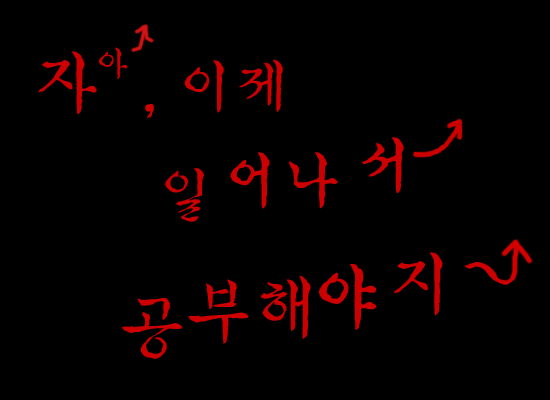
<style>
.page{position:relative;width:550px;height:400px;background:#000000}
.page>*{position:absolute;margin:0}
.t1{font:72px "YDIYhkM-KSCpc-EUC-H";color:#cc0000}
.t2{font:36px "YDIYhkM-KSCpc-EUC-H";color:#cc0000}
.t3{font:60px "YDIYhkM-KSCpc-EUC-H";color:#cc0000}
.t4{font:60px "YDIYhkB-KSCpc-EUC-H";color:#cc0000}
.t5{font:72px "YDIYhkB-KSCpc-EUC-H";color:#cc0000}
.t6{font:72px "YDIYhkB-KSCpc-EUC-H";color:#cc0000;scale:1.23 1}
</style>
<div class="page">
<p class="t1" style="left:38px;top:51px;width:59px;height:64px">자</p>
<p class="t2" style="left:99px;top:47px;width:29px;height:33px">아</p>
<p class="t3" style="left:184px;top:60px;width:40px;height:53px">이</p>
<p class="t3" style="left:239px;top:59px;width:44px;height:53px">제</p>
<p class="t4" style="left:145px;top:103px;width:9px;height:15px">,</p>
<p class="t4" style="left:362px;top:137px;width:42px;height:57px">서</p>
<p class="t4" style="left:230px;top:152px;width:40px;height:57px">어</p>
<p class="t4" style="left:289px;top:152px;width:49px;height:57px">나</p>
<p class="t3" style="left:165px;top:168px;width:39px;height:54px">일</p>
<p class="t1" style="left:393px;top:252px;width:50px;height:64px">지</p>
<p class="t5" style="left:319px;top:264px;width:58px;height:66px">야</p>
<p class="t6" style="left:464px;top:262px;width:51px;height:23px;rotate:25deg">~</p>
<p class="t1" style="left:188px;top:279px;width:61px;height:65px">부</p>
<p class="t1" style="left:260px;top:275px;width:51px;height:64px">해</p>
<p class="t1" style="left:122px;top:297px;width:61px;height:62px">공</p>
</div>
